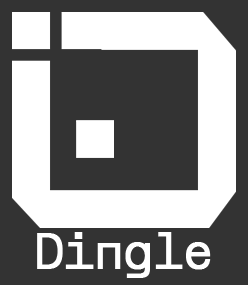
<style>
.page{position:relative;width:248px;height:285px;background:#333333}
.page>*{position:absolute;margin:0}
.t1{font:50px "Orbit-Regular";letter-spacing:-0.025em;color:#ffffff;font-weight:bold}
</style>
<div class="page">
<p class="t1" style="left:37px;top:232px;width:174px;height:46px">Dingle</p>
</div>
